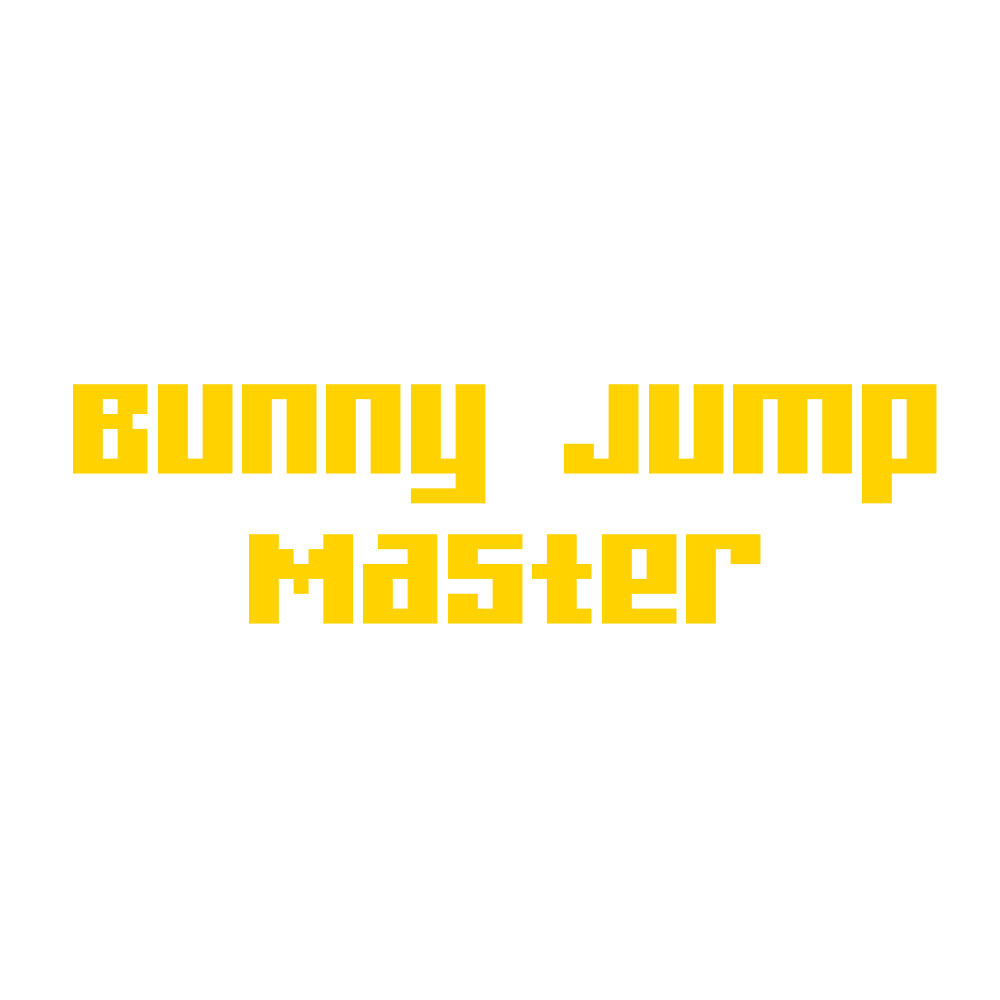
<style>
.page{position:relative;width:1000px;height:1000px;background:#ffffff}
.page>*{position:absolute;margin:0}
.t1{font:237.5px/150px "Gamer";letter-spacing:-0.02em;color:#ffd200}
</style>
<div class="page">
<p class="t1" style="left:73px;top:384px;width:864px;height:240px;text-align:center">Bunny Jump<br>Master</p>
</div>
